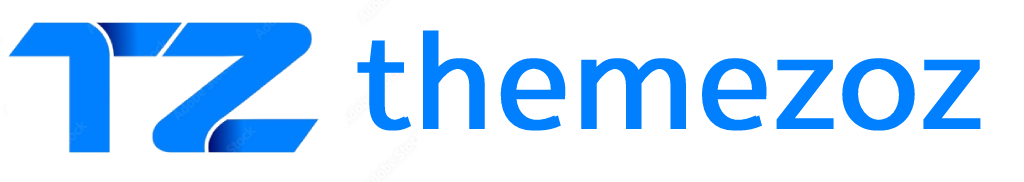
<style>
.page{position:relative;width:1024px;height:182px;background:#ffffff}
.page>*{position:absolute;margin:0}
.t1{font:133px "ABeeZee-Regular";color:#0080ff;font-weight:bold}
</style>
<div class="page">
<p class="t1" style="left:357px;top:30px;width:624px;height:101px">themezoz</p>
</div>
